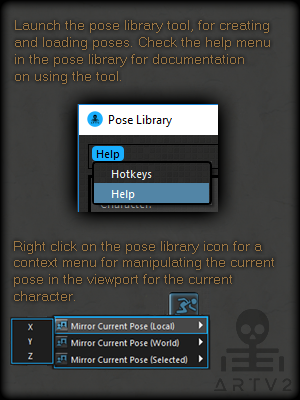
<style>
.page{position:relative;width:300px;height:400px}
.page>*{position:absolute;margin:0}
.t1{font:14px "MicrosoftSansSerif";color:#9b7643}
</style>
<div class="page">
<p class="t1" style="left:15px;top:20px;width:255px;height:64px">Launch the pose library tool, for creating<br>and loading poses. Check the help menu<br>in the pose library for documentation<br>on using the tool.</p>
<p class="t1" style="left:14px;top:241px;width:260px;height:60px">Right click on the pose library icon for a<br>context menu for manipulating the current<br>pose in the viewport for the current<br>character.</p>
</div>
